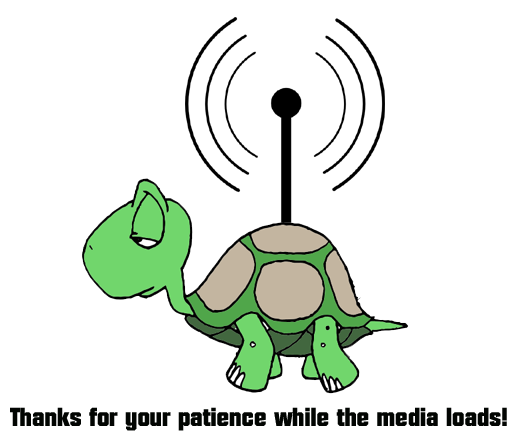
<style>
.page{position:relative;width:513px;height:441px;background:#ffffff}
.page>*{position:absolute;margin:0}
.t1{font:26px "FacetBlack";color:#020502}
</style>
<div class="page">
<p class="t1" style="left:10px;top:407px;width:497px;height:24px">Thanks for your patience while the media loads!</p>
</div>
